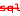
<style>
.page{position:relative;width:20px;height:16px;background:#ffffff}
.page>*{position:absolute;margin:0}
.t1{font:9.4px "DejaVuSansMono";color:#ff0000;scale:1.33 1}
.t2{font:24px "DejaVuSansMono";color:#ff0000;scale:1.33 1}
</style>
<div class="page">
<p class="t1" style="left:0px;top:3px;width:21px;height:10px">sql</p>
<p class="t2" style="left:0px;top:7px;width:20px;height:2px">_</p>
</div>
